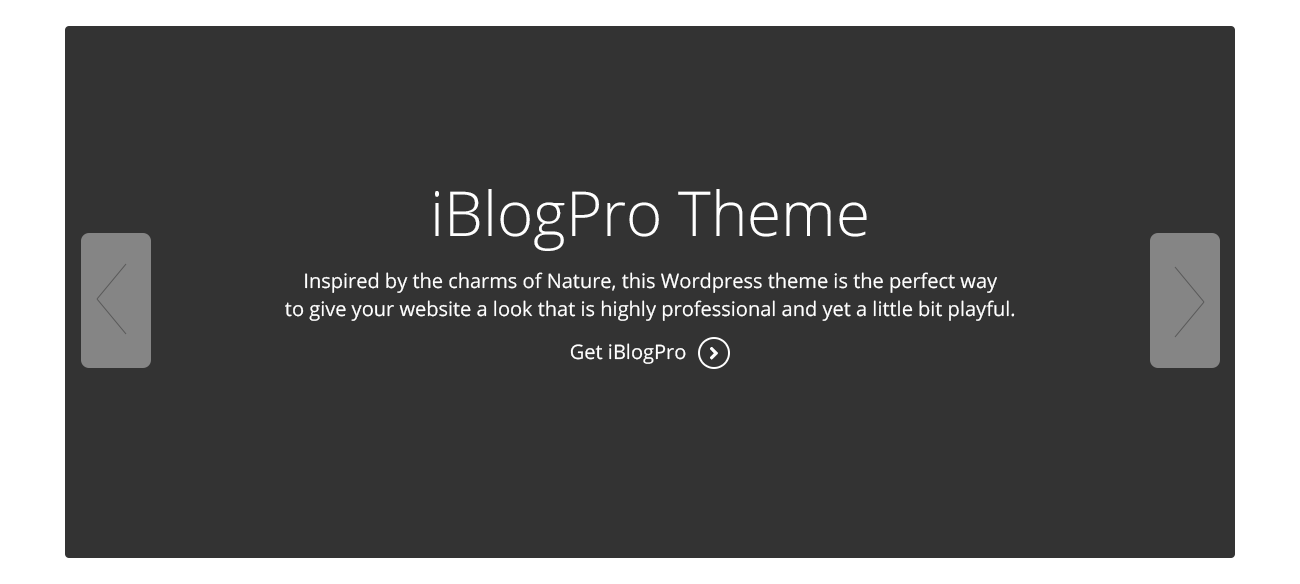
<style>
.page{position:relative;width:1300px;height:584px;background:#333333}
.page>*{position:absolute;margin:0}
.t1{font:62px "OpenSans-Light";color:#ffffff}
.t2{font:20px/28px "OpenSans";color:#ffffff}
.t3{font:20px "OpenSans";color:#ffffff}
</style>
<div class="page">
<p class="t1" style="left:435px;top:189px;width:432px;height:62px">iBlogPro Theme</p>
<p class="t2" style="left:285px;top:272px;width:730px;height:49px;text-align:center">Inspired by the charms of Nature, this Wordpress theme is the perfect way<br>to give your website a look that is highly professional and yet a little bit playful.</p>
<p class="t3" style="left:570px;top:343px;width:116px;height:21px">Get iBlogPro</p>
</div>
